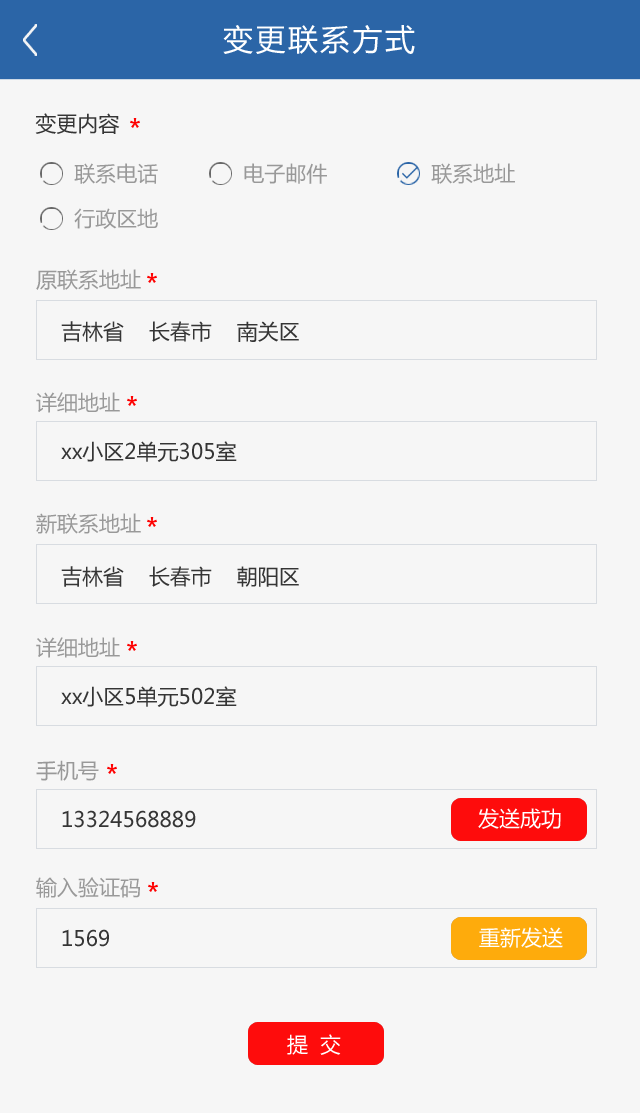
<style>
.page{position:relative;width:640px;height:1113px;background:#f6f6f6}
.page>*{position:absolute;margin:0}
.t1{font:30px "MicrosoftYaHei";letter-spacing:0.08em;color:#ffffff}
.t2{font:21px "MicrosoftYaHei";color:#353535}
.t3{font:21px "MicrosoftYaHei";color:#999999}
.t4{font:21px "MicrosoftYaHei";color:#ffffff}
.t5{font:21px "MicrosoftYaHei";letter-spacing:0.14em;color:#ffffff}
</style>
<div class="page">
<p class="t1" style="left:223px;top:25px;width:192px;height:29px">变更联系方式</p>
<p class="t2" style="left:35px;top:113px;width:85px;height:21px">变更内容</p>
<p class="t3" style="left:74px;top:163px;width:84px;height:21px">联系电话</p>
<p class="t3" style="left:244px;top:163px;width:83px;height:21px">电子邮件</p>
<p class="t3" style="left:431px;top:163px;width:84px;height:21px">联系地址</p>
<p class="t3" style="left:74px;top:208px;width:84px;height:21px">行政区地</p>
<p class="t3" style="left:36px;top:269px;width:105px;height:21px">原联系地址</p>
<p class="t2" style="left:61px;top:321px;width:238px;height:21px">吉林省    长春市    南关区</p>
<p class="t3" style="left:36px;top:392px;width:84px;height:21px">详细地址</p>
<p class="t2" style="left:61px;top:441px;width:176px;height:21px">xx小区2单元305室</p>
<p class="t3" style="left:36px;top:513px;width:105px;height:21px">新联系地址</p>
<p class="t2" style="left:61px;top:566px;width:238px;height:21px">吉林省    长春市    朝阳区</p>
<p class="t3" style="left:36px;top:637px;width:84px;height:21px">详细地址</p>
<p class="t2" style="left:61px;top:686px;width:176px;height:21px">xx小区5单元502室</p>
<p class="t3" style="left:36px;top:760px;width:63px;height:21px">手机号</p>
<p class="t4" style="left:478px;top:808px;width:83px;height:21px">发送成功</p>
<p class="t2" style="left:62px;top:810px;width:134px;height:18px">13324568889</p>
<p class="t3" style="left:36px;top:877px;width:104px;height:21px">输入验证码</p>
<p class="t2" style="left:62px;top:929px;width:47px;height:18px">1569</p>
<p class="t4" style="left:479px;top:927px;width:84px;height:21px">重新发送</p>
<p class="t5" style="left:287px;top:1034px;width:54px;height:21px">提 交</p>
</div>
